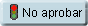
<style>
.page{position:relative;width:88px;height:26px;background:#c3d9e2}
.page>*{position:absolute;margin:0}
.t1{font:12px "ArialMT";color:#000000}
</style>
<div class="page">
<p class="t1" style="left:23px;top:8px;width:59px;height:11px">No aprobar</p>
</div>
